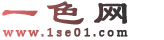
<style>
.page{position:relative;width:164px;height:40px;background:#ffffff}
.page>*{position:absolute;margin:0}
.t1{font:35px "LiSu";letter-spacing:0.2em;font-weight:bold;scale:1.08 1}
.t2{font:12px "Cambria";letter-spacing:0.2em;font-weight:bold;scale:1.05 1}
</style>
<div class="page">
<p class="t1" style="left:2px;top:1px;width:125px;height:24px">一色网</p>
<p class="t2" style="left:3px;top:28px;width:125px;height:9px">www.1se01.com</p>
</div>
